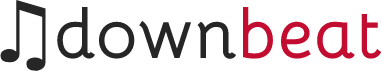
<style>
.page{position:relative;width:382px;height:71px;background:#ffffff}
.page>*{position:absolute;margin:0}
.t1{font:85px "DejaVuSans";color:#262626}
.t2{font:70px "Bellota-Bold";color:#262626}
.t3{font:70px "Bellota-Bold";color:#c20c30}
</style>
<div class="page">
<p class="t1" style="left:0px;top:0px;width:46px;height:71px">♫</p>
<p class="t2" style="left:57px;top:6px;width:325px;height:53px">down<span class="t3">beat</span></p>
</div>
